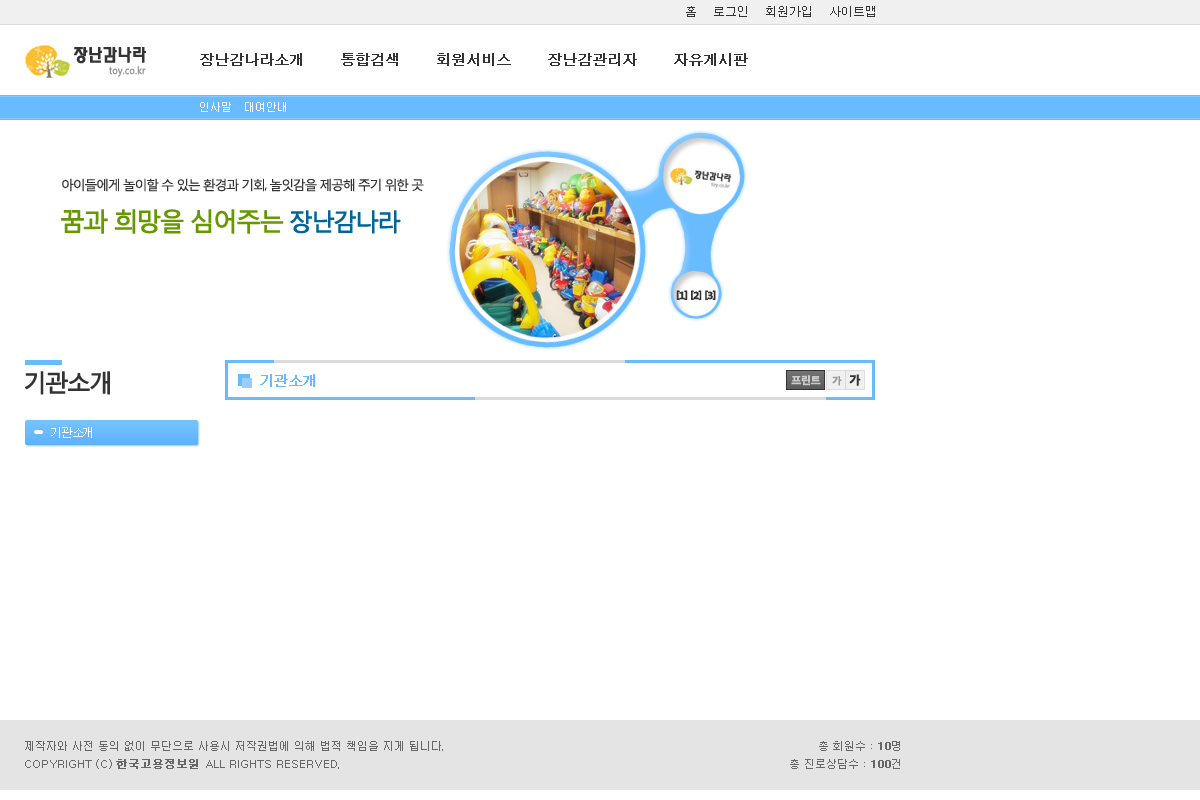
<style>
.page{position:relative;width:1200px;height:800px;background:#ffffff}
.page>*{position:absolute;margin:0}
.t1{font:12px "Dotum";color:#333333;text-transform:uppercase}
.t2{font:14px "Dotum";color:#333333;font-variant:small-caps;font-weight:bold}
.t3{font:11px "Dotum";color:#ffffff;text-transform:uppercase}
.t4{font:13px "MalgunGothicRegular";letter-spacing:-0.1em;color:#333333;text-transform:uppercase}
.t5{font:25px "MalgunGothicRegular";letter-spacing:-0.1em;color:#669900;text-transform:uppercase;font-weight:bold}
.t6{font:23.8px "MalgunGothicRegular";letter-spacing:-0.1em;color:#006699;text-transform:uppercase;font-weight:bold}
.t7{font:9.9px "MalgunGothicBold";letter-spacing:-0.1em;color:#333333;font-weight:bold;scale:1.06 1}
.t8{font:23.8px "MalgunGothicRegular";letter-spacing:-0.1em;color:#333333;text-transform:uppercase;font-weight:bold}
.t9{font:14px "Dotum";letter-spacing:-0.05em;color:#69bbff;text-transform:uppercase;font-weight:bold}
.t10{font:10.4px "MalgunGothicBold";letter-spacing:-0.1em;color:#cccccc;text-transform:uppercase;font-weight:bold}
.t11{font:9.5px "MalgunGothicBold";letter-spacing:-0.1em;color:#999999;text-transform:uppercase;font-weight:bold}
.t12{font:11.4px "MalgunGothicBold";letter-spacing:-0.1em;color:#333333;text-transform:uppercase;font-weight:bold}
.t13{font:12px "Dotum";letter-spacing:-0.1em;color:#ffffff;text-transform:uppercase}
.t14{font:11px/18px "Dotum";color:#666666;text-transform:uppercase}
.t15{font:11px/18px "Dotum";color:#666666;text-transform:uppercase;font-weight:bold}
</style>
<div class="page">
<p class="t1" style="left:686px;top:6px;width:189px;height:11px">홈    로그인    회원가입    사이트맵</p>
<p class="t2" style="left:200px;top:53px;width:548px;height:13px">장난감나라소개      통합검색      회원서비스      장난감관리자      자유게시판</p>
<p class="t3" style="left:200px;top:102px;width:86px;height:10px">인사말   대여안내</p>
<p class="t4" style="left:62px;top:178px;width:362px;height:14px">아이들에게 놀이할 수 있는 환경과 기회, 놀잇감을 제공해 주기 위한 곳</p>
<p class="t5" style="left:61px;top:209px;width:340px;height:25px">꿈과 희망을 심어주는 <span class="t6">장난감나라</span></p>
<p class="t7" style="left:676px;top:290px;width:40px;height:10px">[1] [2] [3]</p>
<p class="t8" style="left:25px;top:371px;width:85px;height:24px">기관소개</p>
<p class="t9" style="left:260px;top:374px;width:55px;height:13px">기관소개</p>
<p class="t10" style="left:791px;top:375px;width:30px;height:11px">프린트</p>
<p class="t11" style="left:832px;top:376px;width:10px;height:10px">가</p>
<p class="t12" style="left:849px;top:374px;width:12px;height:12px">가</p>
<p class="t13" style="left:51px;top:427px;width:41px;height:11px">기관소개</p>
<p class="t14" style="left:25px;top:741px;width:418px;height:28px">제작자와 사전 동의 없이 무단으로 사용시 저작권법에 의해 법적 책임을 지게 됩니다.<br>copyright (c) <span class="t15">한국고용정보원 </span>all rights reserved.</p>
<p class="t14" style="left:790px;top:741px;width:110px;height:28px;text-align:right">총 회원수 : <span class="t15">10</span>명<br>총 진로상담수 : <span class="t15">100</span>건</p>
</div>
